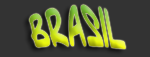
<style>
.page{position:relative;width:150px;height:57px;background:#333333}
.page>*{position:absolute;margin:0}
.t1{font:36px "EncoreNorScriptCasedOblique";letter-spacing:0.02em}
</style>
<div class="page">
<p class="t1" style="left:29px;top:4px;width:97px;height:45px">BRASIL</p>
</div>
